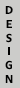
<style>
.page{position:relative;width:20px;height:88px;background:#ccccca}
.page>*{position:absolute;margin:0}
.t1{font:12px/7px "ObliquaITCStd-Bold";color:#000000;text-transform:uppercase}
</style>
<div class="page">
<p class="t1" style="left:5px;top:6px;width:8px;height:77px;text-align:center">D<br>E<br>s<br>i<br>g<br>n</p>
</div>
